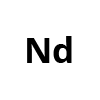
<style>
.page{position:relative;width:100px;height:100px;background:#ffffff}
.page>*{position:absolute;margin:0}
.t1{font:35px "OpenSans-Bold";color:#000000}
</style>
<div class="page">
<p class="t1" style="left:27px;top:36px;width:45px;height:27px">Nd</p>
</div>
